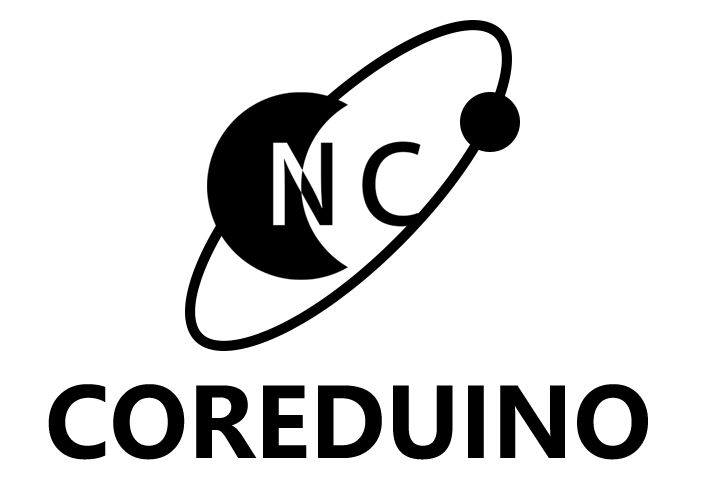
<style>
.page{position:relative;width:706px;height:488px;background:#ffffff}
.page>*{position:absolute;margin:0}
.t1{font:95.8px "MicrosoftYaHei-Bold";color:#000000}
</style>
<div class="page">
<p class="t1" style="left:48px;top:384px;width:600px;height:76px">COREDUINO</p>
</div>
